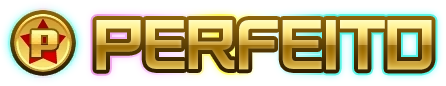
<style>
.page{position:relative;width:446px;height:86px}
.page>*{position:absolute;margin:0}
.t1{font:56px "KafuTechnoStd-U";letter-spacing:0.001em;scale:0.95 1}
</style>
<div class="page">
<p class="t1" style="left:96px;top:20px;width:336px;height:50px">PERFEITO</p>
</div>
